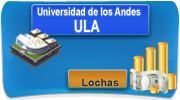
<style>
.page{position:relative;width:180px;height:100px}
.page>*{position:absolute;margin:0}
.t1{font:11.1px/16.7px "Arial-BoldMT";color:#ffffff;scale:0.77 1}
.t2{font:13.9px/16.7px "Arial-BoldMT";color:#ffffff;scale:0.77 1}
.t3{font:16.7px/16.7px "Arial-BoldMT";color:#ffffff;scale:0.77 1}
.t4{font:10.4px "Arial-BoldMT";color:#303030;scale:1.03 1}
.t5{font:20.8px "Arial-BoldMT";color:#303030;scale:1.03 1}
</style>
<div class="page">
<p class="t1" style="left:37px;top:7px;width:104px;height:26px;text-align:center"><span class="t2">                                       </span>Universidad de los Andes<br><span class="t3">            ULA</span></p>
<p class="t4" style="left:82px;top:78px;width:37px;height:9px"><span class="t5"><br></span>Lochas</p>
</div>
